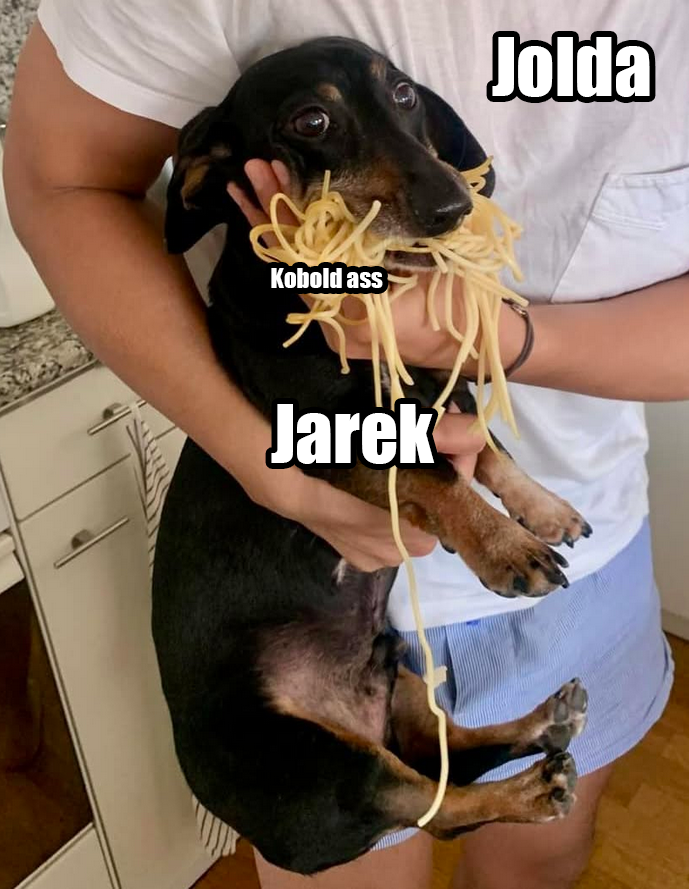
<style>
.page{position:relative;width:689px;height:889px}
.page>*{position:absolute;margin:0}
.t1{font:75px "Impact";color:#ffffff}
.t2{font:25px "Impact";color:#ffffff}
</style>
<div class="page">
<p class="t1" style="left:492px;top:37px;width:158px;height:60px">Jolda</p>
<p class="t2" style="left:271px;top:268px;width:112px;height:20px">Kobold ass</p>
<p class="t1" style="left:271px;top:404px;width:164px;height:60px">Jarek</p>
</div>
